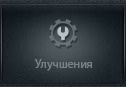
<style>
.page{position:relative;width:126px;height:87px}
.page>*{position:absolute;margin:0}
.t1{font:12px "MyriadPro-Regular";color:#778288}
</style>
<div class="page">
<p class="t1" style="left:35px;top:59px;width:57px;height:12px">Улучшения</p>
</div>
